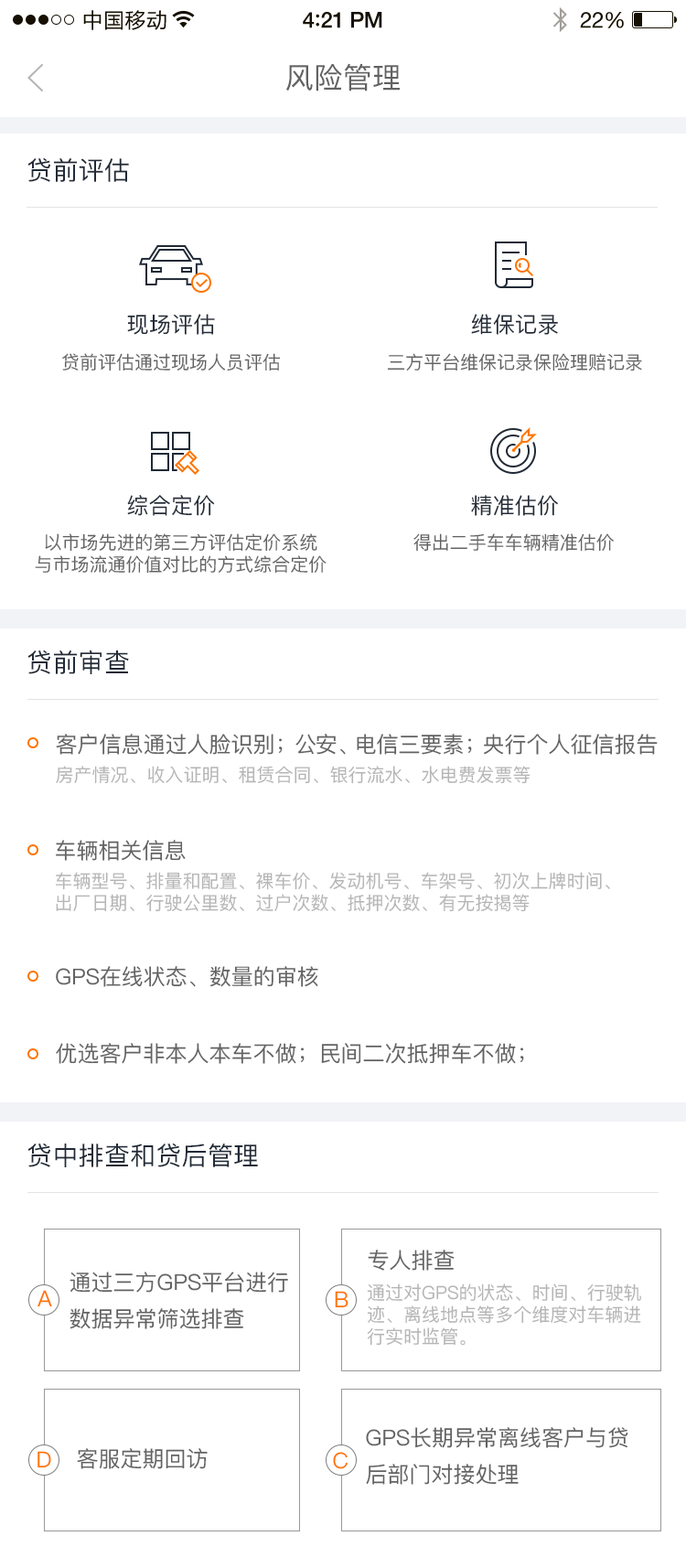
<style>
.page{position:relative;width:686px;height:1568px;background:#ffffff}
.page>*{position:absolute;margin:0}
.t1{font:21px "FZLTHK--GBK1-0";letter-spacing:0.02em;color:#000000}
.t2{font:21.9px "HelveticaNeue-Medium";letter-spacing:-0.02em;color:#000000}
.t3{font:23.8px "Avenir-Medium";letter-spacing:-0.02em;color:#000000}
.t4{font:29.2px "PingFang-SC-Medium";letter-spacing:0.01em;color:#626262}
.t5{font:25.6px "PingFang-SC-Medium";letter-spacing:0.01em;color:#212a36}
.t6{font:22px "PingFang-SC-Medium";letter-spacing:0.01em;color:#212a36}
.t7{font:18.3px "PingFang-SC-Medium";color:#626262}
.t8{font:21.9px "PingFang-SC-Medium";color:#626262}
.t9{font:18.3px "PingFang-SC-Medium";color:#b6b5b6}
.t10{font:21.9px/36.6px "PingFang-SC-Medium";color:#626262}
.t11{font:22px "PingFang-SC-Medium";color:#ff7400}
</style>
<div class="page">
<p class="t1" style="left:83px;top:10px;width:83px;height:20px">中国移动</p>
<p class="t2" style="left:303px;top:12px;width:79px;height:16px">4<span class="t3">:</span>21 PM</p>
<p class="t4" style="left:286px;top:63px;width:114px;height:28px">风险管理</p>
<p class="t5" style="left:27px;top:157px;width:102px;height:25px">贷前评估</p>
<p class="t6" style="left:127px;top:314px;width:88px;height:21px">现场评估</p>
<p class="t6" style="left:471px;top:314px;width:87px;height:21px">维保记录</p>
<p class="t7" style="left:62px;top:353px;width:219px;height:18px">贷前评估通过现场人员评估</p>
<p class="t7" style="left:387px;top:353px;width:255px;height:18px">三方平台维保记录保险理赔记录</p>
<p class="t6" style="left:127px;top:495px;width:88px;height:21px">综合定价</p>
<p class="t6" style="left:471px;top:495px;width:87px;height:21px">精准估价</p>
<p class="t7" style="left:35px;top:533px;width:292px;height:41px;text-align:center">以市场先进的第三方评估定价系统<br>与市场流通价值对比的方式综合定价</p>
<p class="t7" style="left:413px;top:533px;width:201px;height:19px">得出二手车车辆精准估价</p>
<p class="t5" style="left:27px;top:650px;width:102px;height:24px">贷前审查</p>
<p class="t8" style="left:56px;top:734px;width:602px;height:21px">客户信息通过人脸识别；公安、电信三要素；央行个人征信报告</p>
<p class="t9" style="left:56px;top:766px;width:475px;height:18px">房产情况、收入证明、租赁合同、银行流水、水电费发票等</p>
<p class="t8" style="left:56px;top:840px;width:130px;height:21px">车辆相关信息</p>
<p class="t9" style="left:56px;top:872px;width:554px;height:40px">车辆型号、排量和配置、裸车价、发动机号、车架号、初次上牌时间、<br>出厂日期、行驶公里数、过户次数、抵押次数、有无按揭等</p>
<p class="t8" style="left:56px;top:966px;width:262px;height:21px">GPS在线状态、数量的审核</p>
<p class="t8" style="left:56px;top:1043px;width:468px;height:21px">优选客户非本人本车不做；民间二次抵押车不做；</p>
<p class="t5" style="left:27px;top:1143px;width:231px;height:24px">贷中排查和贷后管理</p>
<p class="t8" style="left:368px;top:1250px;width:87px;height:21px">专人排查</p>
<p class="t10" style="left:70px;top:1272px;width:218px;height:57px">通过三方GPS平台进行<br>数据异常筛选排查</p>
<p class="t11" style="left:38px;top:1290px;width:14px;height:17px">A</p>
<p class="t9" style="left:367px;top:1283px;width:274px;height:63px">通过对GPS的状态、时间、行驶轨<br>迹、离线地点等多个维度对车辆进<br>行实时监管。</p>
<p class="t11" style="left:335px;top:1291px;width:14px;height:17px">B</p>
<p class="t10" style="left:366px;top:1427px;width:262px;height:58px">GPS长期异常离线客户与贷<br>后部门对接处理</p>
<p class="t11" style="left:38px;top:1451px;width:13px;height:17px">D</p>
<p class="t8" style="left:77px;top:1448px;width:131px;height:21px">客服定期回访</p>
<p class="t11" style="left:333px;top:1452px;width:15px;height:17px">C</p>
</div>
